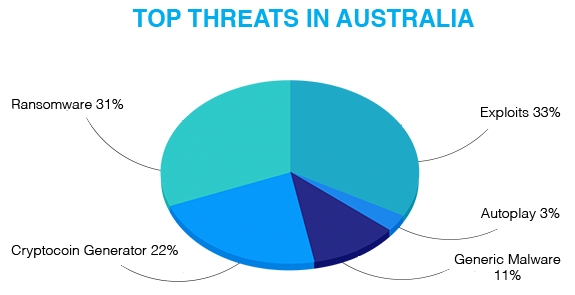
<style>
.page{position:relative;width:575px;height:295px;background:#ffffff}
.page>*{position:absolute;margin:0}
.t1{font:24px "Helvetica-Bold";color:#00aeef}
.t2{font:14px "Helvetica-Light";color:#000000}
</style>
<div class="page">
<p class="t1" style="left:132px;top:9px;width:342px;height:18px">TOP THREATS IN AUSTRALIA</p>
<p class="t2" style="left:12px;top:99px;width:112px;height:10px">Ransomware 31%</p>
<p class="t2" style="left:481px;top:107px;width:80px;height:13px">Exploits 33%</p>
<p class="t2" style="left:480px;top:208px;width:80px;height:13px">Autoplay 3%</p>
<p class="t2" style="left:11px;top:245px;width:167px;height:13px">Cryptocoin Generator 22%</p>
<p class="t2" style="left:454px;top:254px;width:107px;height:26px;text-align:center">Generic Malware<br>11%</p>
</div>
